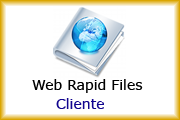
<style>
.page{position:relative;width:180px;height:120px;background:#ffffff}
.page>*{position:absolute;margin:0}
.t1{font:14px "Verdana";color:#000000}
.t2{font:14px "Verdana";color:#13068f}
</style>
<div class="page">
<p class="t1" style="left:32px;top:79px;width:111px;height:14px">Web Rapid Files</p>
<p class="t2" style="left:56px;top:98px;width:48px;height:11px">Cliente</p>
</div>
